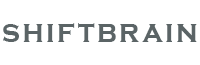
<style>
.page{position:relative;width:200px;height:65px;background:#ffffff}
.page>*{position:absolute;margin:0}
.t1{font:33.3px "CopperplateGothic-Bold";letter-spacing:0.08em;color:#5b6466;scale:0.88 1}
</style>
<div class="page">
<p class="t1" style="left:3px;top:23px;width:194px;height:19px">shiftbrain</p>
</div>
